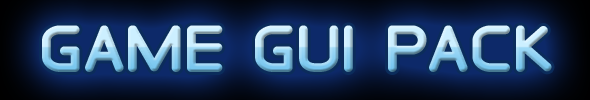
<style>
.page{position:relative;width:590px;height:100px}
.page>*{position:absolute;margin:0}
.t1{font:58.3px "SaranaiGame-Bold"}
</style>
<div class="page">
<p class="t1" style="left:42px;top:25px;width:510px;height:47px">game gui PACK</p>
</div>
